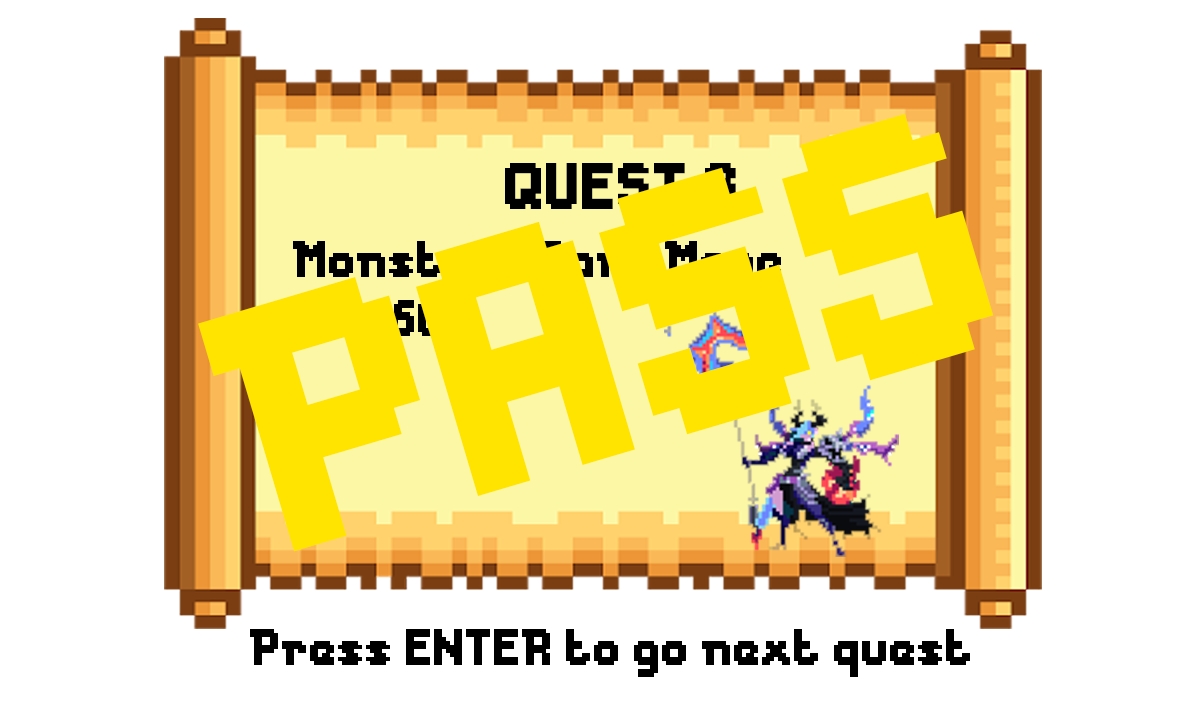
<style>
.page{position:relative;width:1200px;height:720px;background:#ffffff}
.page>*{position:absolute;margin:0}
.t1{font:327.3px "Messe-Duesseldorf";color:#ffe400}
.t2{font:61.3px "Messe-Duesseldorf";color:#000000}
.t3{font:48px "Messe-Duesseldorf"}
.t4{font:48px "Messe-Duesseldorf";color:#ffe400}
.t5{font:48px "Messe-Duesseldorf";color:#000000}
</style>
<div class="page">
<p class="t1" style="left:198px;top:113px;width:796px;height:439px;rotate:-17deg">PASS</p>
<p class="t2" style="left:505px;top:163px;width:231px;height:46px">QUEST 3</p>
<p class="t3" style="left:293px;top:241px;width:488px;height:48px">Monster : Dark Mage</p>
<p class="t4" style="left:294px;top:300px;width:148px;height:36px">HP : 60</p>
<p class="t5" style="left:250px;top:629px;width:720px;height:48px">Press ENTER to go next quest</p>
</div>
